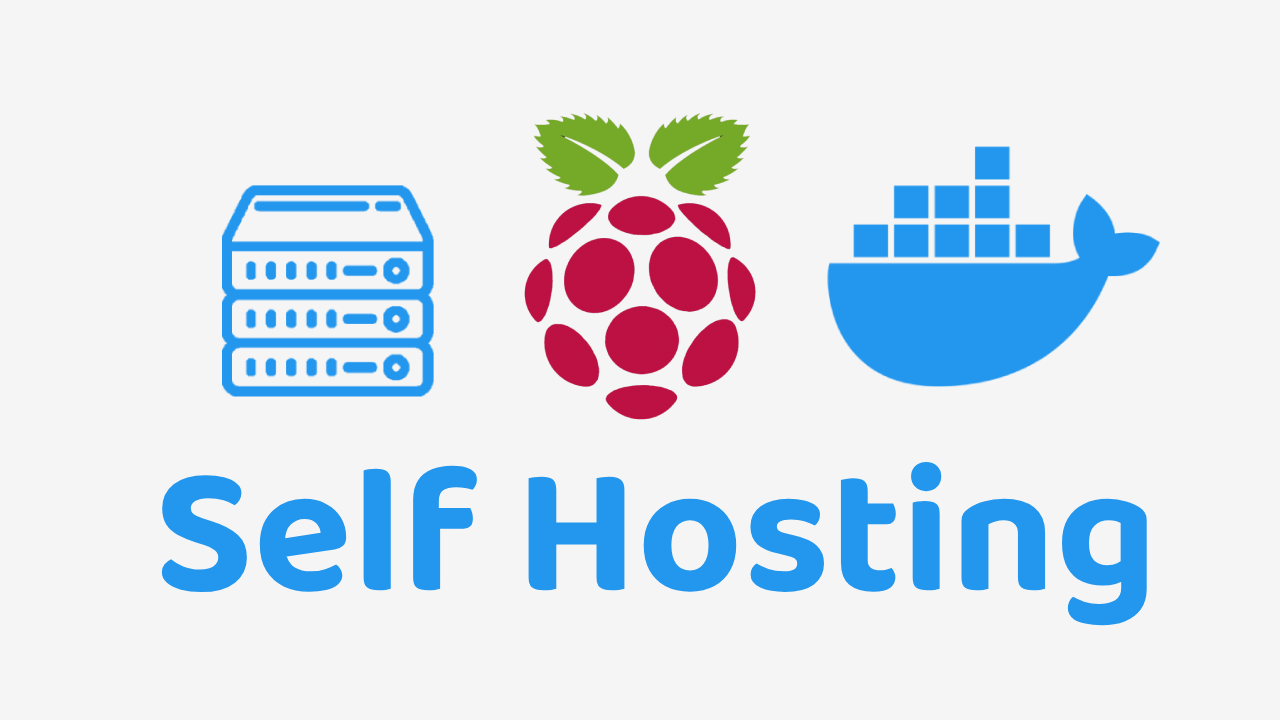
<style>
.page{position:relative;width:1280px;height:720px;background:#f5f5f5}
.page>*{position:absolute;margin:0}
.t1{font:182.1px "Baloo2-Bold";color:#2396ed}
</style>
<div class="page">
<p class="t1" style="left:161px;top:461px;width:986px;height:165px">Self Hosting</p>
</div>
